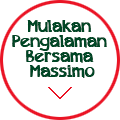
<style>
.page{position:relative;width:120px;height:120px;background:#ffffff}
.page>*{position:absolute;margin:0}
.t1{font:18px/15px "appleberry";color:#004625}
</style>
<div class="page">
<p class="t1" style="left:12px;top:20px;width:95px;height:58px;text-align:center">Mulakan <br>Pengalaman <br>Bersama <br>Massimo</p>
</div>
